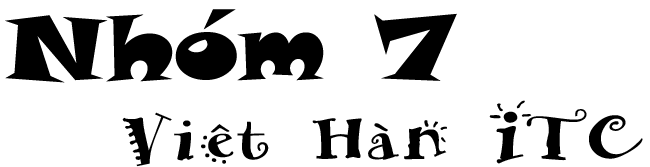
<style>
.page{position:relative;width:650px;height:167px;background:#ffffff}
.page>*{position:absolute;margin:0}
.t1{font:67.1px "ARHERMANN";color:#000000;scale:1.2 1}
.t2{font:89.5px "SnapITC-Regular";color:#000000;scale:1.2 1}
</style>
<div class="page">
<p class="t1" style="left:5px;top:9px;width:638px;height:158px"><span class="t2">Nhóm 7 <br>   </span>Viêt Hàn ITC</p>
</div>
